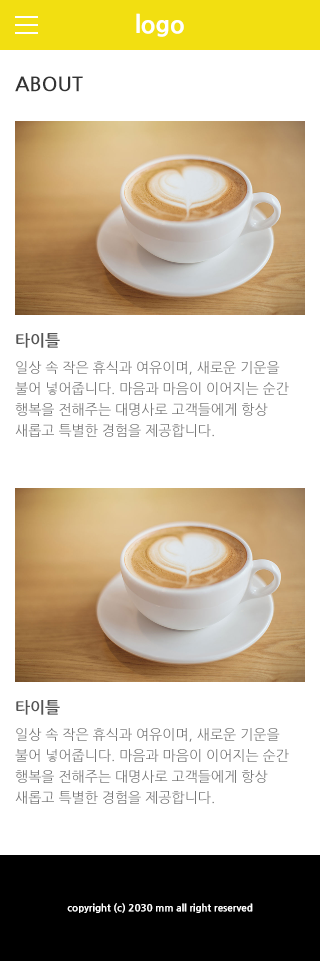
<style>
.page{position:relative;width:320px;height:961px;background:#ffffff}
.page>*{position:absolute;margin:0}
.t1{font:24px "NanumGothicExtraBold";color:#ffffff}
.t2{font:20px "NanumGothicBold";color:#333333;text-transform:uppercase}
.t3{font:16px "NanumGothicBold";color:#555555}
.t4{font:14px/21px "NanumGothic";color:#767676}
.t5{font:10px "NanumGothicExtraBold";color:#ffffff}
</style>
<div class="page">
<p class="t1" style="left:136px;top:13px;width:48px;height:24px">logo</p>
<p class="t2" style="left:15px;top:76px;width:68px;height:16px">about</p>
<p class="t3" style="left:16px;top:333px;width:44px;height:15px">타이틀</p>
<p class="t4" style="left:15px;top:361px;width:274px;height:76px">일상 속 작은 휴식과 여유이며, 새로운 기운을 불어 넣어줍니다. 마음과 마음이 이어지는 순간행복을 전해주는 대명사로 고객들에게 항상 새롭고 특별한 경험을 제공합니다.</p>
<p class="t3" style="left:16px;top:700px;width:44px;height:15px">타이틀</p>
<p class="t4" style="left:15px;top:728px;width:274px;height:76px">일상 속 작은 휴식과 여유이며, 새로운 기운을 불어 넣어줍니다. 마음과 마음이 이어지는 순간행복을 전해주는 대명사로 고객들에게 항상 새롭고 특별한 경험을 제공합니다.</p>
<p class="t5" style="left:67px;top:903px;width:186px;height:10px">copyright (c) 2030 mm all right reserved</p>
</div>
